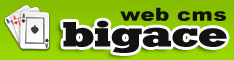
<style>
.page{position:relative;width:234px;height:60px}
.page>*{position:absolute;margin:0}
.t1{font:18px "Arial-Black";letter-spacing:0.01em;color:#131212;scale:1.2 1}
</style>
<div class="page">
<p class="t1" style="left:120px;top:7px;width:106px;height:14px">web cms</p>
</div>
